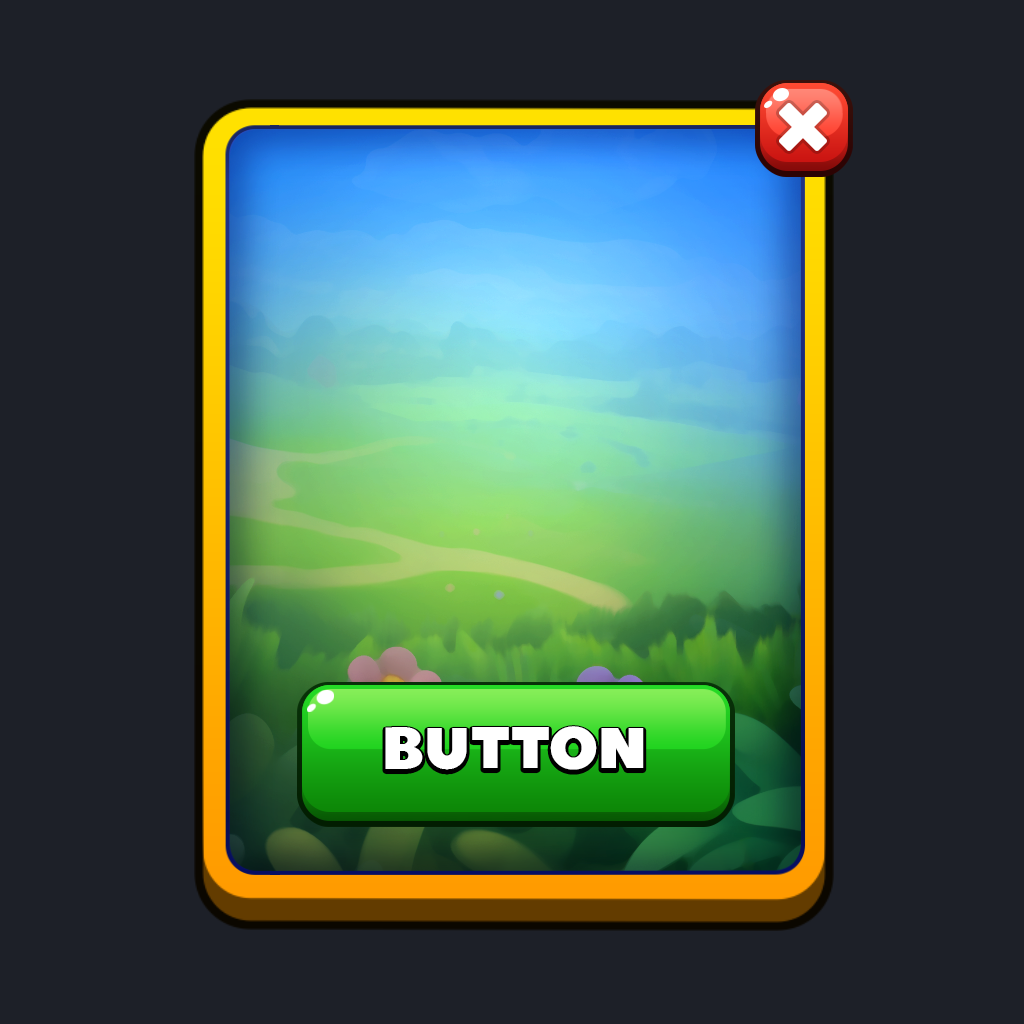
<style>
.page{position:relative;width:1024px;height:1024px;background:#1d2028}
.page>*{position:absolute;margin:0}
.t1{font:60px "Peace";color:#ffffff;text-transform:uppercase}
</style>
<div class="page">
<p class="t1" style="left:385px;top:726px;width:259px;height:44px">Button</p>
</div>
